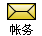
<style>
.page{position:relative;width:42px;height:36px;background:#ffffff}
.page>*{position:absolute;margin:0}
.t1{font:12px "SimSun";letter-spacing:0.02em;color:#000000}
</style>
<div class="page">
<p class="t1" style="left:10px;top:24px;width:23px;height:11px">帐务</p>
</div>
